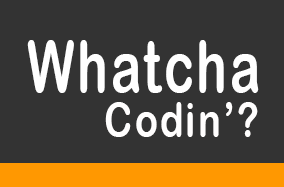
<style>
.page{position:relative;width:284px;height:187px;background:#333333}
.page>*{position:absolute;margin:0}
.t1{font:72px "ArialRoundedMTBold";letter-spacing:0.06em;color:#ffffff;scale:0.71 1}
.t2{font:48px "ArialRoundedMTBold";letter-spacing:0.06em;color:#fffefe;scale:0.79 1}
</style>
<div class="page">
<p class="t1" style="left:27px;top:40px;width:232px;height:53px">Whatcha</p>
<p class="t2" style="left:105px;top:102px;width:153px;height:35px">Codin’?</p>
</div>
